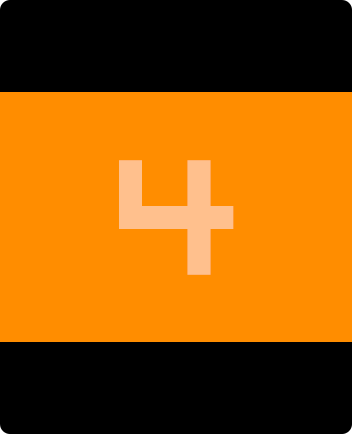
<style>
.page{position:relative;width:352px;height:434px;background:#ff8d00}
.page>*{position:absolute;margin:0}
.t1{font:160px "Bit-Trip7-(sRB)";color:#ffc08d}
</style>
<div class="page">
<p class="t1" style="left:119px;top:160px;width:115px;height:115px">4</p>
</div>
